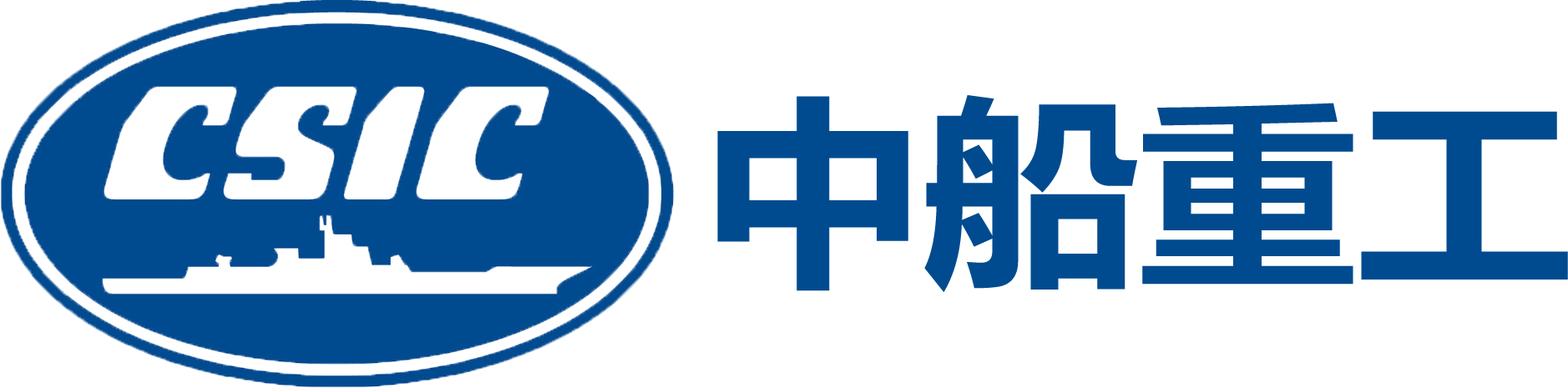
<style>
.page{position:relative;width:1568px;height:388px;background:#ffffff}
.page>*{position:absolute;margin:0}
.t1{font:200.6px "MicrosoftYaHei-Bold";color:#004b8f;scale:1.08 1}
</style>
<div class="page">
<p class="t1" style="left:717px;top:95px;width:851px;height:197px">中船重工</p>
</div>
